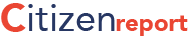
<style>
.page{position:relative;width:189px;height:37px;background:#ffffff}
.page>*{position:absolute;margin:0}
.t1{font:38px "Avenir-Roman";color:#273763}
.t2{font:38px "Avenir-Black";color:#ea4633}
.t3{font:24px "Avenir-Black";color:#ea4633}
</style>
<div class="page">
<p class="t1" style="left:1px;top:3px;width:114px;height:29px"><span class="t2">C</span>itizen</p>
<p class="t3" style="left:116px;top:15px;width:72px;height:21px">report</p>
</div>
